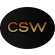
<style>
.page{position:relative;width:55px;height:55px;background:#ffffff}
.page>*{position:absolute;margin:0}
.t1{font:16px "Hero-Bold";color:#4c4c4c}
</style>
<div class="page">
<p class="t1" style="left:7px;top:22px;width:40px;height:10px">CSW</p>
</div>
